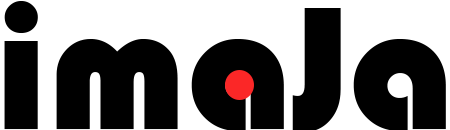
<style>
.page{position:relative;width:450px;height:130px;background:#000000}
.page>*{position:absolute;margin:0}
.t1{font:181.4px "Bauhaus93";color:#000000}
</style>
<div class="page">
<p class="t1" style="left:4px;top:1px;width:442px;height:131px">imaJa</p>
</div>
